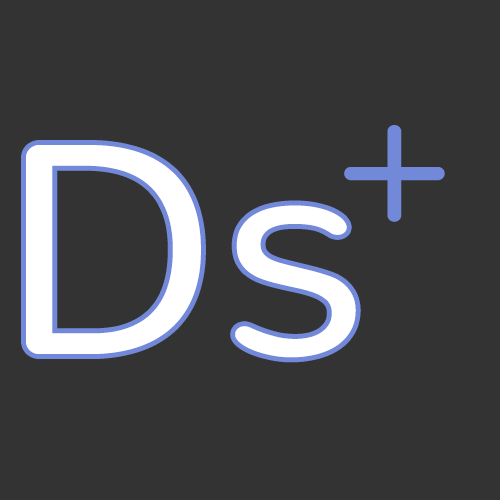
<style>
.page{position:relative;width:500px;height:500px;background:#333333}
.page>*{position:absolute;margin:0}
.t1{font:200px "Nunito-Light";color:#7289da}
.t2{font:300px "Nunito-Light";color:#ffffff}
</style>
<div class="page">
<p class="t1" style="left:344px;top:125px;width:101px;height:97px">+</p>
<p class="t2" style="left:26px;top:145px;width:330px;height:213px">Ds</p>
</div>
